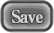
<style>
.page{position:relative;width:54px;height:33px}
.page>*{position:absolute;margin:0}
.t1{font:17px "RyuminPro-ExBold";letter-spacing:-0.08em;color:#dad3d1;font-weight:bold;scale:0.9 1}
</style>
<div class="page">
<p class="t1" style="left:11px;top:9px;width:32px;height:14px">Save</p>
</div>
